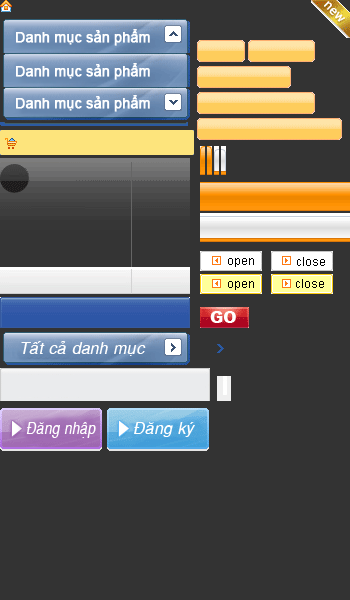
<style>
.page{position:relative;width:350px;height:600px;background:#333333}
.page>*{position:absolute;margin:0}
.t1{font:14px "ArialMT";color:#ffffff;font-weight:bold}
.t2{font:12px "ArialMT";color:#000000}
.t3{font:16px "VNI-Helve-Italic";color:#ffffff}
.t4{font:17px "VNI-Helve-Italic";color:#ffffff;scale:0.8 1}
</style>
<div class="page">
<p class="t1" style="left:16px;top:29px;width:134px;height:17px">Danh mục sản phẩm</p>
<p class="t1" style="left:16px;top:63px;width:134px;height:17px">Danh mục sản phẩm</p>
<p class="t1" style="left:16px;top:95px;width:134px;height:17px">Danh mục sản phẩm</p>
<p class="t2" style="left:297px;top:257px;width:28px;height:9px">close</p>
<p class="t2" style="left:228px;top:258px;width:26px;height:9px">open</p>
<p class="t2" style="left:228px;top:281px;width:26px;height:9px">open</p>
<p class="t2" style="left:296px;top:279px;width:28px;height:9px">close</p>
<p class="t3" style="left:21px;top:341px;width:125px;height:15px">Taát caû danh muïc</p>
<p class="t4" style="left:26px;top:422px;width:70px;height:16px">Ñaêng nhaäp</p>
<p class="t3" style="left:134px;top:422px;width:61px;height:15px">Ñaêng kyù</p>
</div>
